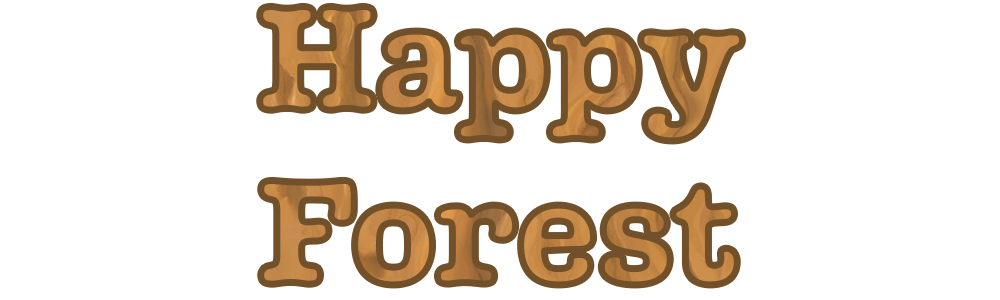
<style>
.page{position:relative;width:1000px;height:300px;background:#ffffff}
.page>*{position:absolute;margin:0}
.t1{font:145px "Margot-Regular"}
</style>
<div class="page">
<p class="t1" style="left:259px;top:6px;width:484px;height:279px;text-align:center">Happy<br>Forest</p>
</div>
